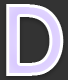
<style>
.page{position:relative;width:68px;height:80px;background:#333333}
.page>*{position:absolute;margin:0}
.t1{font:100px "CenturyGothic-Bold"}
</style>
<div class="page">
<p class="t1" style="left:6px;top:4px;width:58px;height:72px">D</p>
</div>
